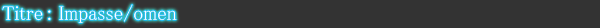
<style>
.page{position:relative;width:600px;height:28px;background:#333333}
.page>*{position:absolute;margin:0}
.t1{font:20px "MS-PMincho";color:#ffffff}
</style>
<div class="page">
<p class="t1" style="left:2px;top:4px;width:175px;height:19px">Titre : Impasse/omen</p>
</div>
